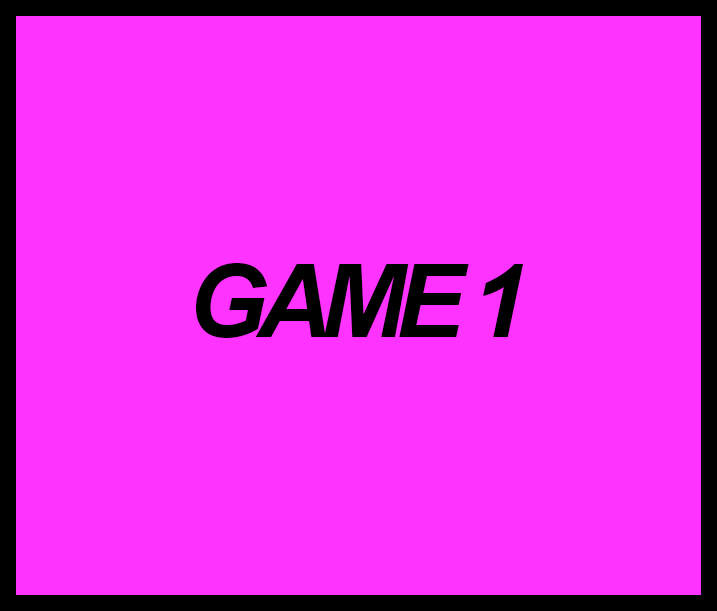
<style>
.page{position:relative;width:717px;height:611px;background:#ff33ff}
.page>*{position:absolute;margin:0}
.t1{font:102px "Arial-BoldItalicMT";letter-spacing:-0.1em;color:#000000}
</style>
<div class="page">
<p class="t1" style="left:196px;top:263px;width:328px;height:75px">GAME 1</p>
</div>
